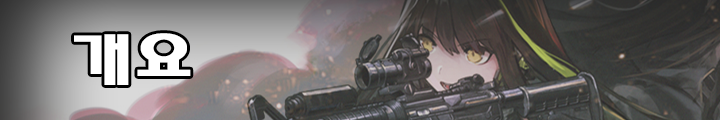
<style>
.page{position:relative;width:720px;height:120px}
.page>*{position:absolute;margin:0}
.t1{font:60px "HYsupB";color:#ffffff;font-weight:bold}
</style>
<div class="page">
<p class="t1" style="left:74px;top:33px;width:117px;height:52px">개요</p>
</div>
